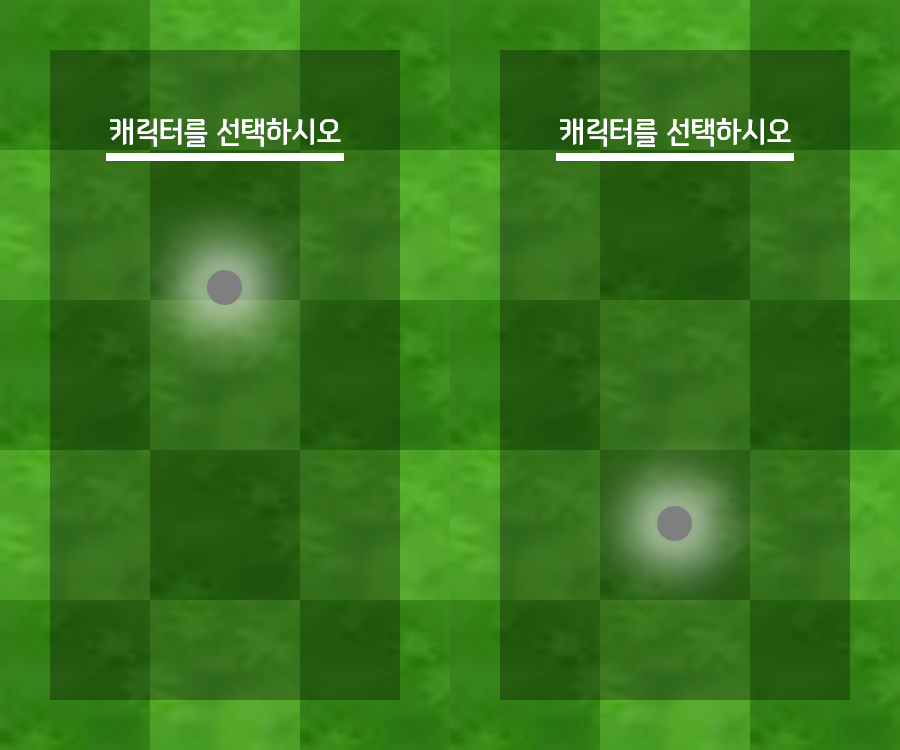
<style>
.page{position:relative;width:900px;height:750px}
.page>*{position:absolute;margin:0}
.t1{font:30.8px "NEXONFootballGothicL";color:#ffffff}
</style>
<div class="page">
<p class="t1" style="left:110px;top:117px;width:231px;height:30px">캐릭터를 선택하시오</p>
<p class="t1" style="left:560px;top:117px;width:231px;height:30px">캐릭터를 선택하시오</p>
</div>
